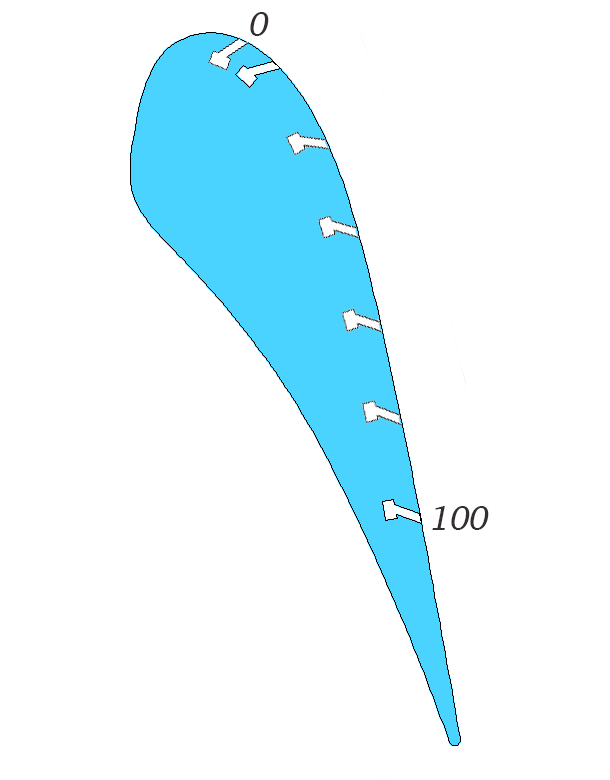
<style>
.page{position:relative;width:610px;height:780px;background:#ffffff}
.page>*{position:absolute;margin:0}
.t1{font:36px "Charter-Roman";letter-spacing:-0.02em;color:#352e31;font-style:italic}
</style>
<div class="page">
<p class="t1" style="left:250px;top:12px;width:19px;height:24px">0</p>
<p class="t1" style="left:432px;top:506px;width:57px;height:24px">100</p>
</div>
